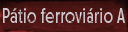
<style>
.page{position:relative;width:128px;height:32px}
.page>*{position:absolute;margin:0}
.t1{font:15.4px "Otterco-Regular";letter-spacing:0.02em;color:#cdc3cb;scale:0.76 1}
</style>
<div class="page">
<p class="t1" style="left:3px;top:8px;width:122px;height:15px">Pátio ferroviário A</p>
</div>
